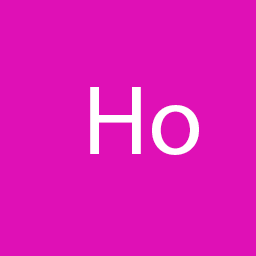
<style>
.page{position:relative;width:256px;height:256px;background:#df10b6}
.page>*{position:absolute;margin:0}
.t1{font:100px "MyriadPro-Regular";color:#ffffff}
</style>
<div class="page">
<p class="t1" style="left:90px;top:87px;width:109px;height:68px">Ho</p>
</div>
